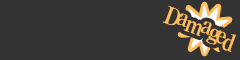
<style>
.page{position:relative;width:240px;height:60px;background:#333333}
.page>*{position:absolute;margin:0}
.t1{font:24px "RyuminPro-ExBold";letter-spacing:-0.16em;color:#ffbc5d;scale:0.9 1}
</style>
<div class="page">
<p class="t1" style="left:162px;top:5px;width:74px;height:47px;rotate:20deg">Damaged</p>
</div>
